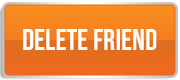
<style>
.page{position:relative;width:180px;height:80px}
.page>*{position:absolute;margin:0}
.t1{font:30px "UTM-Bebas";color:#ffffff}
</style>
<div class="page">
<p class="t1" style="left:23px;top:29px;width:134px;height:21px">delete friend</p>
</div>
